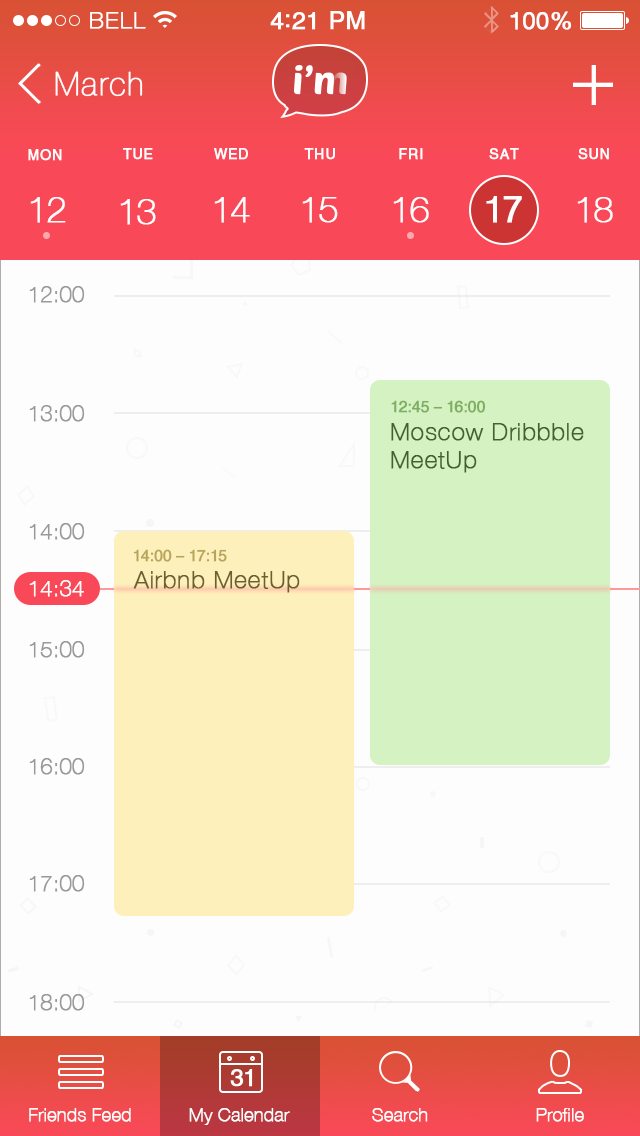
<style>
.page{position:relative;width:640px;height:1136px;background:#fdfdfd}
.page>*{position:absolute;margin:0}
.t1{font:23px "HelveticaNeueLT-Thin";letter-spacing:0.05em;color:#ffffff;font-weight:bold}
.t2{font:24px "Helvetica";letter-spacing:0.01em;color:#ffffff;font-weight:bold}
.t3{font:24px "HelveticaGreek-Upright";letter-spacing:-0.025em;color:#ffffff;font-weight:bold}
.t4{font:32.5px "HelveticaNeueLT-UltraLight";letter-spacing:0.03em;color:#ffffff;font-weight:bold}
.t5{font:14px "Helvetica";letter-spacing:0.05em;color:#fdfdfd;font-weight:bold}
.t6{font:36px "HelveticaNeueLT-Thin";letter-spacing:-0.075em;color:#fdfdfd;font-weight:bold}
.t7{font:36px "HelveticaGreek-Upright";letter-spacing:-0.075em;color:#fdfdfd;font-weight:bold}
.t8{font:36px "HelveticaNeueLT-Thin";letter-spacing:-0.03em;color:#ffffff;font-weight:bold}
.t9{font:22px "HelveticaNeueLT-Thin";letter-spacing:-0.01em;color:#999999;font-weight:bold}
.t10{font:16px "HelveticaCyr-Upright";letter-spacing:-0.03em;color:#7fae62;font-weight:bold}
.t11{font:24px/28px "HelveticaNeueLT-Thin";letter-spacing:0.025em;color:#41612d;font-weight:bold}
.t12{font:16px "HelveticaCyr-Upright";letter-spacing:-0.03em;color:#b8a55c;font-weight:bold}
.t13{font:22px "HelveticaNeueLT-Thin";letter-spacing:-0.01em;color:#ffffff;font-weight:bold}
.t14{font:24px "HelveticaNeueLT-Thin";letter-spacing:0.025em;color:#6c5f2f;font-weight:bold}
.t15{font:18px "HelveticaNeueLT-Thin";color:#fdfdfd;font-weight:bold}
</style>
<div class="page">
<p class="t1" style="left:90px;top:12px;width:56px;height:17px">BELL</p>
<p class="t2" style="left:270px;top:12px;width:46px;height:18px">4:21</p>
<p class="t3" style="left:510px;top:11px;width:62px;height:19px">100%</p>
<p class="t4" style="left:55px;top:71px;width:88px;height:26px">March</p>
<p class="t5" style="left:28px;top:149px;width:34px;height:12px">MON</p>
<p class="t5" style="left:123px;top:148px;width:30px;height:12px">TUE</p>
<p class="t5" style="left:214px;top:148px;width:34px;height:12px">WED</p>
<p class="t5" style="left:304px;top:148px;width:31px;height:12px">THU</p>
<p class="t5" style="left:399px;top:148px;width:24px;height:12px">FRI</p>
<p class="t5" style="left:489px;top:148px;width:30px;height:12px">SAT</p>
<p class="t5" style="left:578px;top:148px;width:31px;height:12px">SUN</p>
<p class="t6" style="left:30px;top:197px;width:36px;height:26px">12</p>
<p class="t6" style="left:214px;top:197px;width:36px;height:26px">14</p>
<p class="t6" style="left:302px;top:197px;width:36px;height:26px">15</p>
<p class="t6" style="left:393px;top:197px;width:36px;height:26px">16</p>
<p class="t7" style="left:486px;top:196px;width:36px;height:27px">17</p>
<p class="t6" style="left:577px;top:197px;width:36px;height:26px">18</p>
<p class="t8" style="left:120px;top:199px;width:36px;height:26px">13</p>
<p class="t9" style="left:29px;top:286px;width:56px;height:17px">12:00</p>
<p class="t10" style="left:391px;top:400px;width:95px;height:13px">12:45 – 16:00</p>
<p class="t9" style="left:29px;top:405px;width:56px;height:17px">13:00</p>
<p class="t11" style="left:391px;top:423px;width:193px;height:50px">Moscow Dribbble<br>MeetUp</p>
<p class="t9" style="left:29px;top:523px;width:56px;height:17px">14:00</p>
<p class="t12" style="left:133px;top:549px;width:94px;height:13px">14:00 – 17:15</p>
<p class="t13" style="left:29px;top:580px;width:55px;height:17px">14:34</p>
<p class="t14" style="left:133px;top:571px;width:167px;height:22px">Airbnb MeetUp</p>
<p class="t9" style="left:29px;top:641px;width:56px;height:17px">15:00</p>
<p class="t9" style="left:29px;top:758px;width:56px;height:17px">16:00</p>
<p class="t9" style="left:29px;top:875px;width:56px;height:17px">17:00</p>
<p class="t9" style="left:29px;top:994px;width:56px;height:17px">18:00</p>
<p class="t15" style="left:29px;top:1108px;width:102px;height:14px">Friends Feed</p>
<p class="t15" style="left:189px;top:1108px;width:101px;height:17px">My Calendar</p>
<p class="t15" style="left:372px;top:1108px;width:56px;height:14px">Search</p>
<p class="t15" style="left:536px;top:1108px;width:48px;height:14px">Profile</p>
</div>
